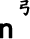
<style>
.page{position:relative;width:30px;height:39px;background:#ffffff}
.page>*{position:absolute;margin:0}
.t1{font:18px "DFKaiShu-SB-Estd-BF";color:#000000;font-weight:bold}
.t2{font:27px "ArialMT";color:#000000;font-weight:bold}
</style>
<div class="page">
<p class="t1" style="left:19px;top:0px;width:11px;height:16px">弓</p>
<p class="t2" style="left:0px;top:23px;width:13px;height:16px">n</p>
</div>
